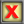
<style>
.page{position:relative;width:24px;height:24px}
.page>*{position:absolute;margin:0}
.t1{font:24px "CenturyGothic-Bold";color:#ff1212}
</style>
<div class="page">
<p class="t1" style="left:5px;top:5px;width:14px;height:13px">x</p>
</div>
